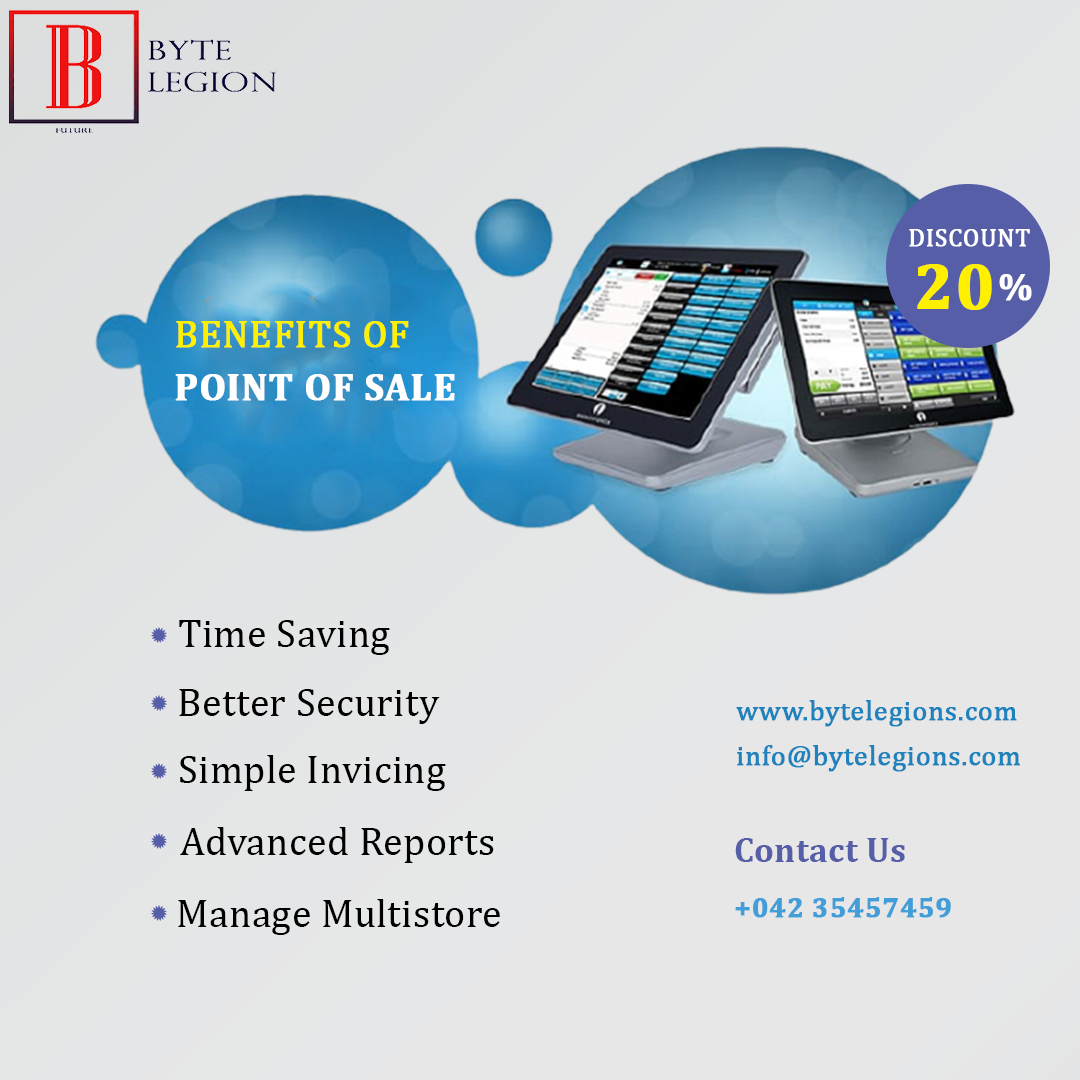
<style>
.page{position:relative;width:1080px;height:1080px}
.page>*{position:absolute;margin:0}
.t1{font:25px "Cambria";letter-spacing:0.01em;color:#ffffff;text-transform:uppercase;font-weight:bold}
.t2{font:65px "Cambria-Bold";letter-spacing:0.01em;color:#fff000;font-weight:bold}
.t3{font:35px "Cambria-Bold";letter-spacing:0.01em;color:#ffffff;font-weight:bold}
.t4{font:38px/52.6px "Cambria-Bold";letter-spacing:0.01em;color:#ffffff;text-transform:uppercase;font-weight:bold}
.t5{font:38px/52.6px "Cambria";letter-spacing:0.01em;color:#fff000;text-transform:uppercase;font-weight:bold}
.t6{font:40px "Cambria";letter-spacing:0.01em;color:#010101}
.t7{font:28px "Cambria";letter-spacing:0.01em;color:#1e83bd;font-weight:bold}
.t8{font:35px "Cambria-Bold";letter-spacing:0.01em;color:#565ea7}
.t9{font:28px "Cambria-Bold";letter-spacing:0.01em;color:#419ed9;font-weight:bold}
</style>
<div class="page">
<p class="t1" style="left:909px;top:229px;width:121px;height:18px">discount</p>
<p class="t2" style="left:917px;top:264px;width:75px;height:46px">20</p>
<p class="t3" style="left:999px;top:274px;width:33px;height:27px">%</p>
<p class="t4" style="left:175px;top:321px;width:280px;height:80px"><span class="t5">Benefits of<br></span>Point Of Sale</p>
<p class="t6" style="left:179px;top:620px;width:211px;height:35px">Time Saving</p>
<p class="t6" style="left:179px;top:689px;width:261px;height:35px">Better Security</p>
<p class="t7" style="left:736px;top:700px;width:281px;height:27px">www.bytelegions.com</p>
<p class="t7" style="left:737px;top:745px;width:283px;height:27px">info@bytelegions.com</p>
<p class="t6" style="left:180px;top:755px;width:266px;height:36px">Simple Invicing</p>
<p class="t6" style="left:180px;top:827px;width:314px;height:36px">Advanced Reports</p>
<p class="t8" style="left:735px;top:838px;width:170px;height:24px">Contact Us</p>
<p class="t6" style="left:178px;top:899px;width:322px;height:36px">Manage Multistore</p>
<p class="t9" style="left:735px;top:897px;width:216px;height:21px">+042 35457459</p>
</div>
